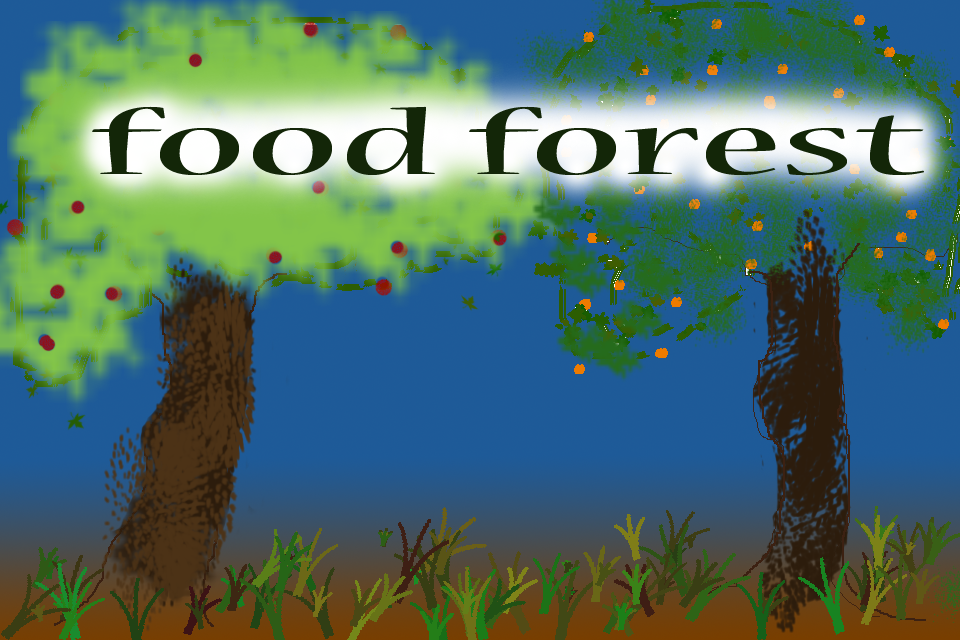
<style>
.page{position:relative;width:960px;height:640px}
.page>*{position:absolute;margin:0}
.t1{font:100px "NuevaStd-Cond";letter-spacing:-0.005em;color:#132608;scale:2.6 1}
</style>
<div class="page">
<p class="t1" style="left:92px;top:106px;width:832px;height:70px">food forest</p>
</div>
